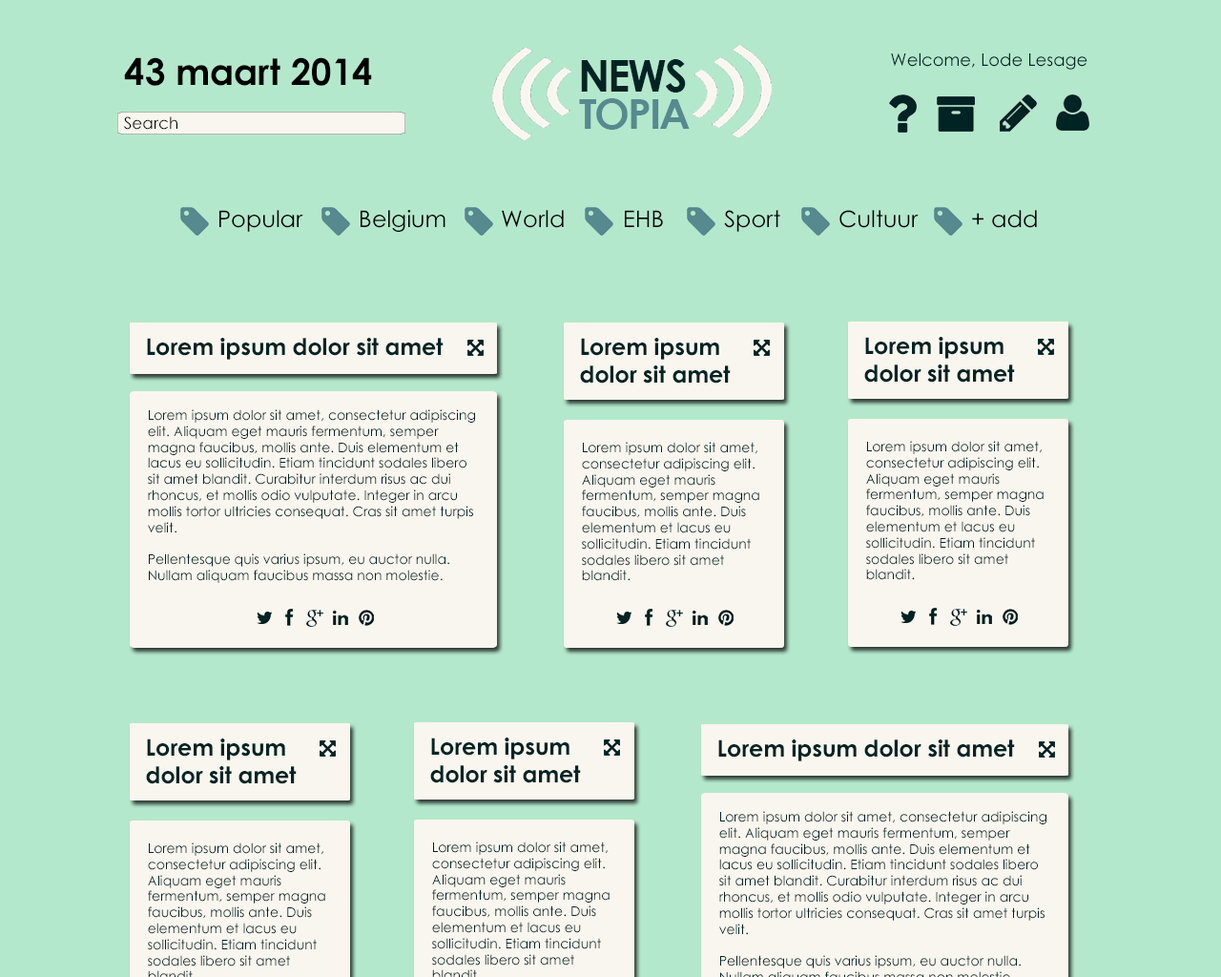
<style>
.page{position:relative;width:1221px;height:977px;background:#b4e8cc}
.page>*{position:absolute;margin:0}
.t1{font:17.2px "CenturyGothic";color:#002424}
.t2{font:36.5px "CenturyGothic-Bold";color:#000000}
.t3{font:43.5px "CenturyGothic-Bold";letter-spacing:-0.05em;color:#002424}
.t4{font:41.4px "CenturyGothic-Bold";letter-spacing:-0.05em;color:#568a8f}
.t5{font:16.2px "CenturyGothic";color:#000000}
.t6{font:22.9px "CenturyGothic";color:#000000}
.t7{font:22.9px "CenturyGothic-Bold";color:#002424}
.t8{font:13.4px "CenturyGothic";color:#002424}
</style>
<div class="page">
<p class="t1" style="left:891px;top:52px;width:196px;height:18px">Welcome, Lode Lesage</p>
<p class="t2" style="left:124px;top:57px;width:248px;height:29px">43 maart 2014</p>
<p class="t3" style="left:581px;top:59px;width:105px;height:34px">NEWS</p>
<p class="t4" style="left:579px;top:98px;width:111px;height:32px">TOPIA</p>
<p class="t5" style="left:124px;top:116px;width:53px;height:14px">Search</p>
<p class="t6" style="left:219px;top:210px;width:84px;height:22px">Popular</p>
<p class="t6" style="left:361px;top:210px;width:84px;height:22px">Belgium</p>
<p class="t6" style="left:502px;top:210px;width:62px;height:18px">World</p>
<p class="t6" style="left:625px;top:210px;width:38px;height:17px">EHB</p>
<p class="t6" style="left:724px;top:210px;width:56px;height:22px">Sport</p>
<p class="t6" style="left:839px;top:210px;width:80px;height:18px">Cultuur</p>
<p class="t6" style="left:972px;top:210px;width:65px;height:18px">+ add</p>
<p class="t7" style="left:147px;top:338px;width:297px;height:22px">Lorem ipsum dolor sit amet</p>
<p class="t7" style="left:580px;top:338px;width:151px;height:45px">Lorem ipsum<br>dolor sit amet</p>
<p class="t7" style="left:864px;top:337px;width:151px;height:45px">Lorem ipsum<br>dolor sit amet</p>
<p class="t8" style="left:148px;top:409px;width:327px;height:174px">Lorem ipsum dolor sit amet, consectetur adipiscing <br>elit. Aliquam eget mauris fermentum, semper<br>magna faucibus, mollis ante. Duis elementum et<br>lacus eu sollicitudin. Etiam tincidunt sodales libero<br>sit amet blandit. Curabitur interdum risus ac dui<br>rhoncus, et mollis odio vulputate. Integer in arcu<br>mollis tortor ultricies consequat. Cras sit amet turpis<br>velit.<br><br>Pellentesque quis varius ipsum, eu auctor nulla.<br>Nullam aliquam faucibus massa non molestie.</p>
<p class="t8" style="left:582px;top:442px;width:177px;height:139px">Lorem ipsum dolor sit amet, <br>consectetur adipiscing elit.<br>Aliquam eget mauris<br>fermentum, semper magna<br>faucibus, mollis ante. Duis<br>elementum et lacus eu<br>sollicitudin. Etiam tincidunt<br>sodales libero sit amet<br>blandit.</p>
<p class="t8" style="left:866px;top:441px;width:177px;height:139px">Lorem ipsum dolor sit amet, <br>consectetur adipiscing elit.<br>Aliquam eget mauris<br>fermentum, semper magna<br>faucibus, mollis ante. Duis<br>elementum et lacus eu<br>sollicitudin. Etiam tincidunt<br>sodales libero sit amet<br>blandit.</p>
<p class="t7" style="left:430px;top:737px;width:151px;height:46px">Lorem ipsum<br>dolor sit amet</p>
<p class="t7" style="left:146px;top:738px;width:151px;height:46px">Lorem ipsum<br>dolor sit amet</p>
<p class="t7" style="left:718px;top:739px;width:297px;height:22px">Lorem ipsum dolor sit amet</p>
</div>
